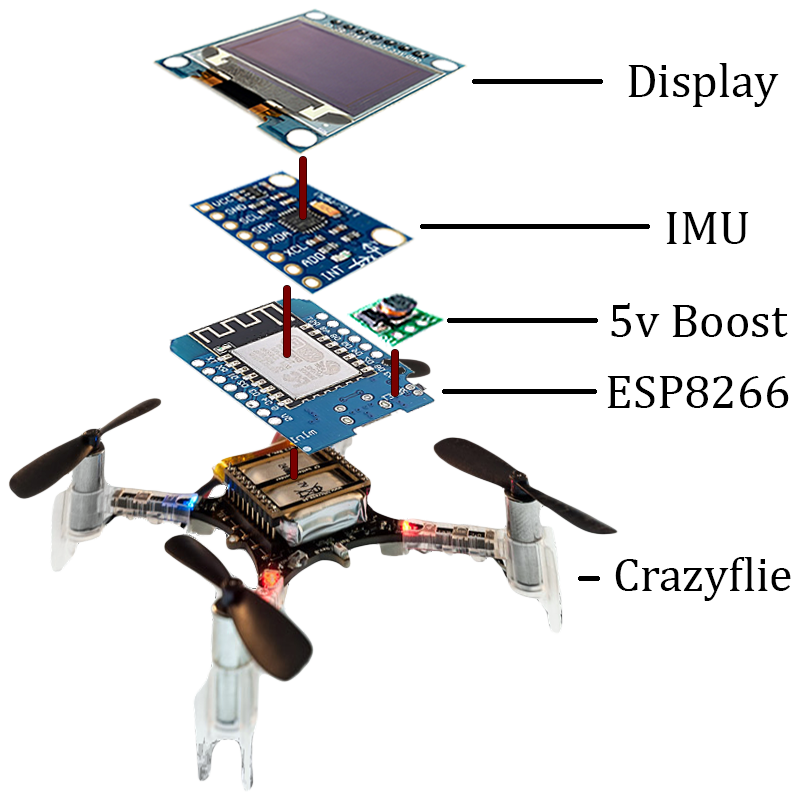
<style>
.page{position:relative;width:800px;height:800px;background:#ffffff}
.page>*{position:absolute;margin:0}
.t1{font:48px "Cambria";color:#000000}
</style>
<div class="page">
<p class="t1" style="left:628px;top:63px;width:151px;height:44px">Display</p>
<p class="t1" style="left:666px;top:212px;width:83px;height:32px">IMU</p>
<p class="t1" style="left:611px;top:303px;width:177px;height:34px">5v Boost</p>
<p class="t1" style="left:607px;top:376px;width:182px;height:32px">ESP8266</p>
<p class="t1" style="left:615px;top:557px;width:176px;height:44px">Crazyflie</p>
</div>
